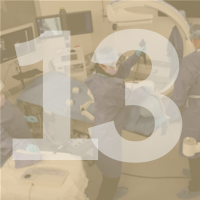
<style>
.page{position:relative;width:200px;height:200px}
.page>*{position:absolute;margin:0}
.t1{font:187.5px "PostGrotesk-Bold";color:#cfcbbe}
.t2{font:187.5px "PostGrotesk-Bold";color:#d2c9bb}
</style>
<div class="page">
<p class="t1" style="left:12px;top:30px;width:87px;height:130px">1</p>
<p class="t2" style="left:88px;top:28px;width:95px;height:135px">3</p>
</div>
